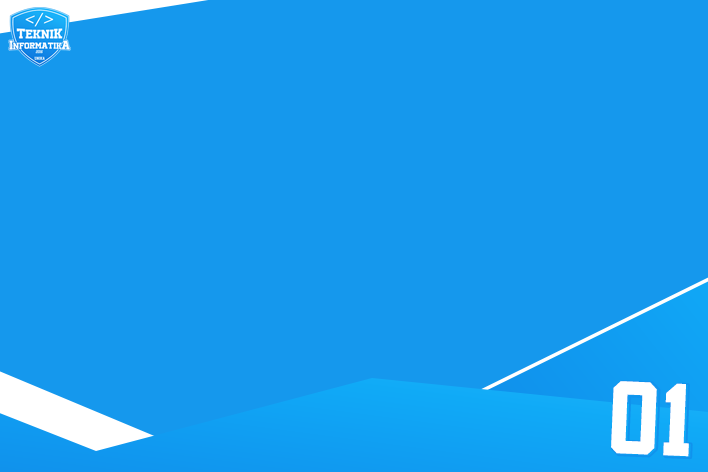
<style>
.page{position:relative;width:708px;height:472px;background:#1598ed}
.page>*{position:absolute;margin:0}
.t1{font:89px "Athletic";letter-spacing:0.08em;color:#ffffff}
</style>
<div class="page">
<p class="t1" style="left:611px;top:381px;width:78px;height:76px;rotate:2deg">01</p>
<p class="t1" style="left:613px;top:382px;width:78px;height:76px;rotate:2deg">01</p>
</div>
